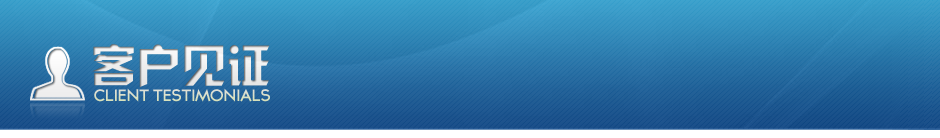
<style>
.page{position:relative;width:940px;height:138px}
.page>*{position:absolute;margin:0}
.t1{font:45px "JLinXin";color:#e7e7e7}
.t2{font:15px "TYPOGRAPHPRO-SemiBold";letter-spacing:-0.068em;color:#dbe0ca}
</style>
<div class="page">
<p class="t1" style="left:92px;top:44px;width:178px;height:43px">客户见证</p>
<p class="t2" style="left:94px;top:88px;width:176px;height:14px">CLIENT TESTIMONIALS</p>
</div>
